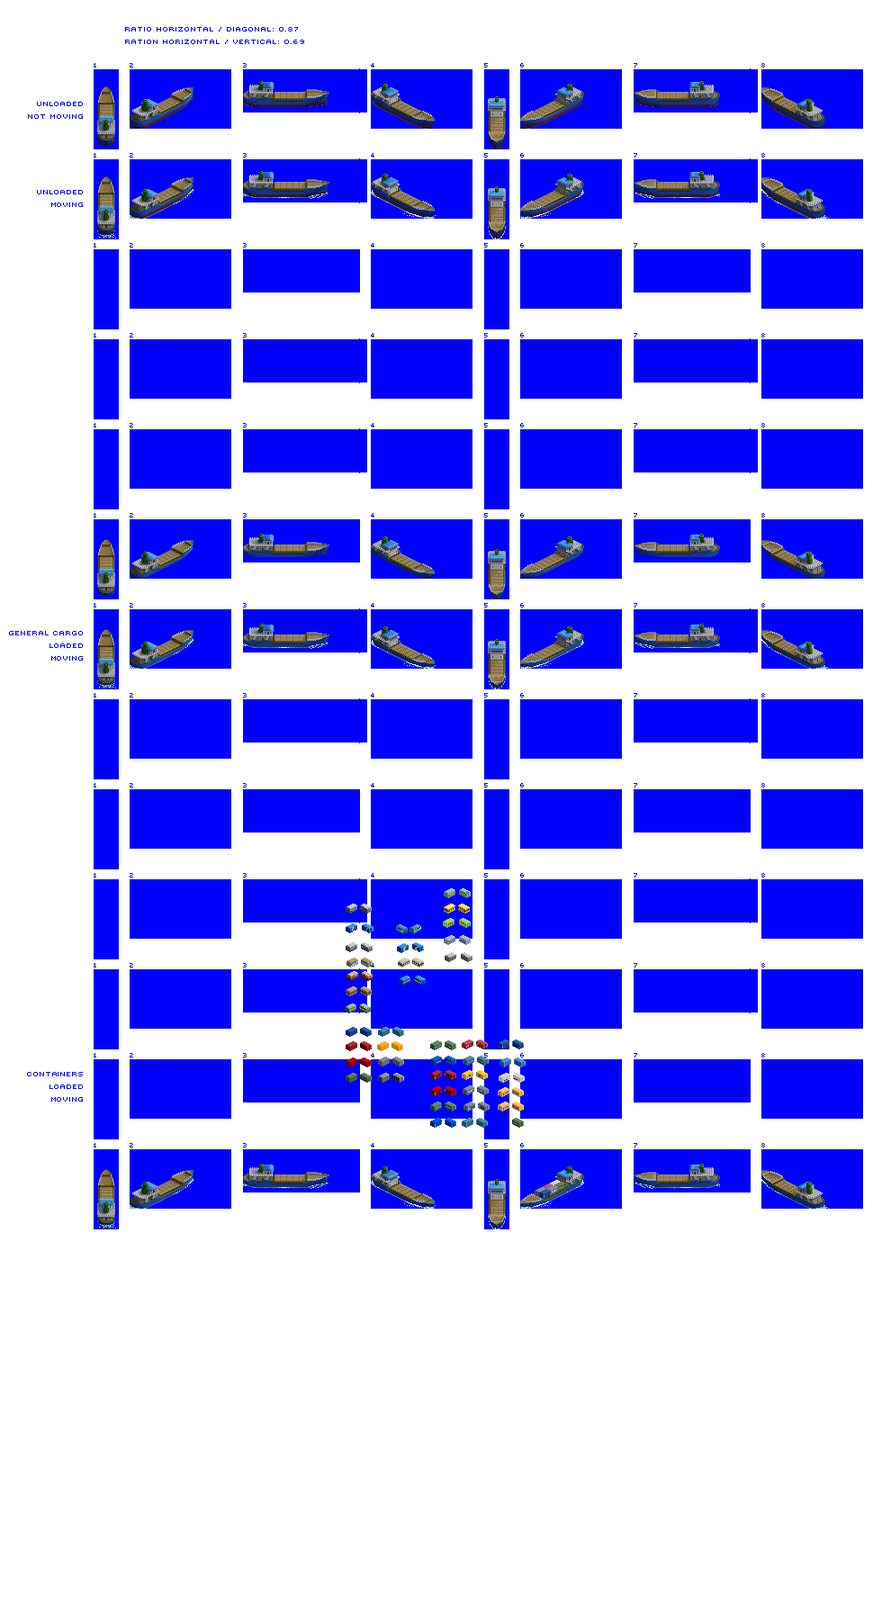
<style>
.page{position:relative;width:873px;height:1620px;background:#ffffff}
.page>*{position:absolute;margin:0}
.t1{font:9px/12.6px "Mini7";color:#0000ff}
.t2{font:9px/12.6px "Mini7";letter-spacing:-0.01em;color:#0000ff}
</style>
<div class="page">
<p class="t1" style="left:125px;top:27px;width:179px;height:17px">ratio horizontal / diagonal: 0.87<br>Ration horizontal / vertical: 0.69</p>
<p class="t2" style="left:9px;top:102px;width:74px;height:1000px;text-align:right">Unloaded<br>Not moving<br><br><br><br><br><br>Unloaded<br>Moving<br><br><br><br><br><br><br><br><br><br><br><br><br><br><br><br><br><br><br><br><br><br><br><br><br><br><br><br><br><br><br><br><br><br>general cargo<br>Loaded<br>moving<br><br><br><br><br><br><br><br><br><br><br><br><br><br><br><br><br><br><br><br><br><br><br><br><br><br><br><br><br><br><br><br><br>containers<br>loaded<br>moving</p>
</div>
